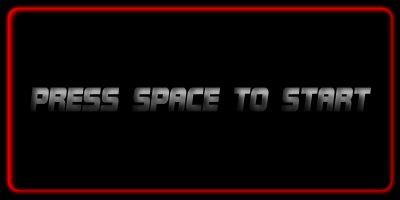
<style>
.page{position:relative;width:400px;height:200px;background:#000000}
.page>*{position:absolute;margin:0}
.t1{font:36px "BolsterBold";letter-spacing:-0.005em;font-weight:bold;font-style:italic;scale:0.69 1}
</style>
<div class="page">
<p class="t1" style="left:29px;top:87px;width:342px;height:25px">PRESS SPACE TO START</p>
</div>
